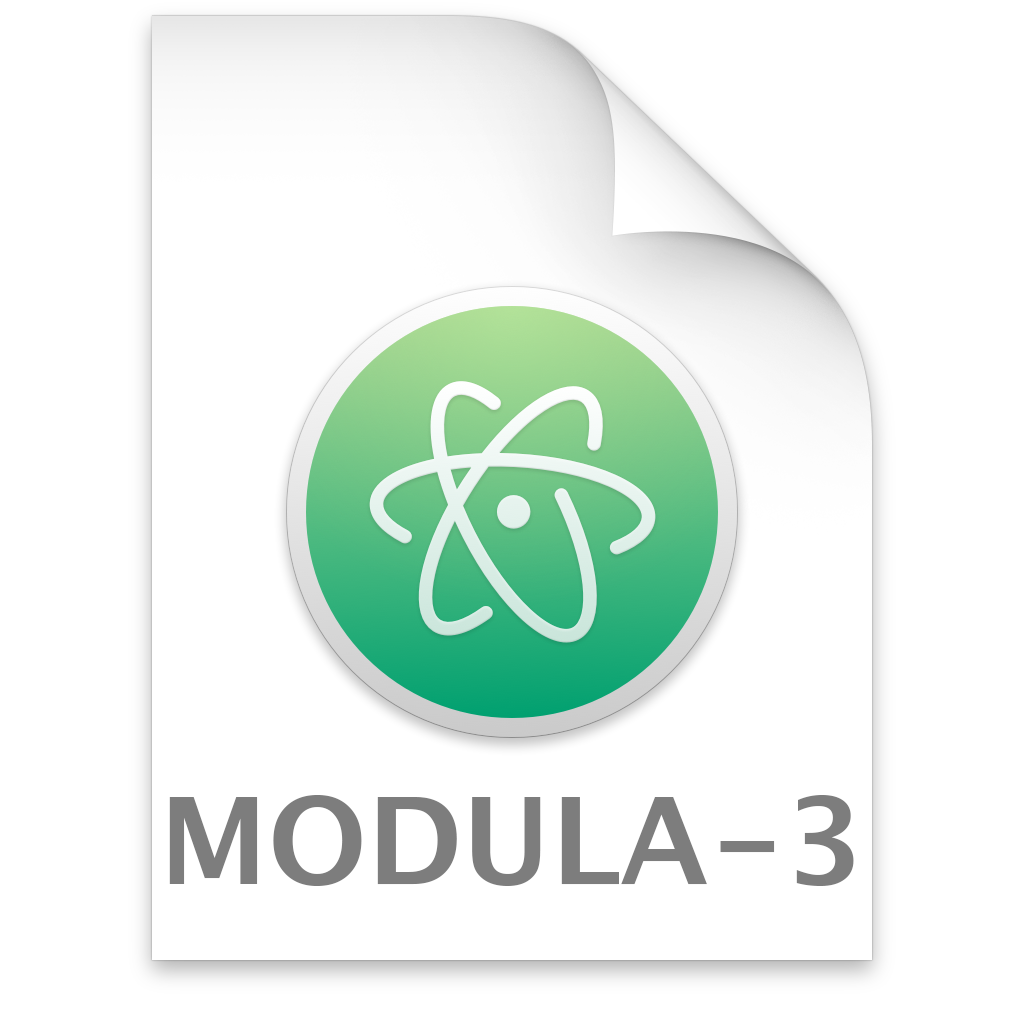
<style>
.page{position:relative;width:1024px;height:1024px;background:#ffffff}
.page>*{position:absolute;margin:0}
.t1{font:120px "LucidaGrande-Bold";color:#7d7d7d}
</style>
<div class="page">
<p class="t1" style="left:169px;top:795px;width:685px;height:91px">MODULA-3</p>
</div>
